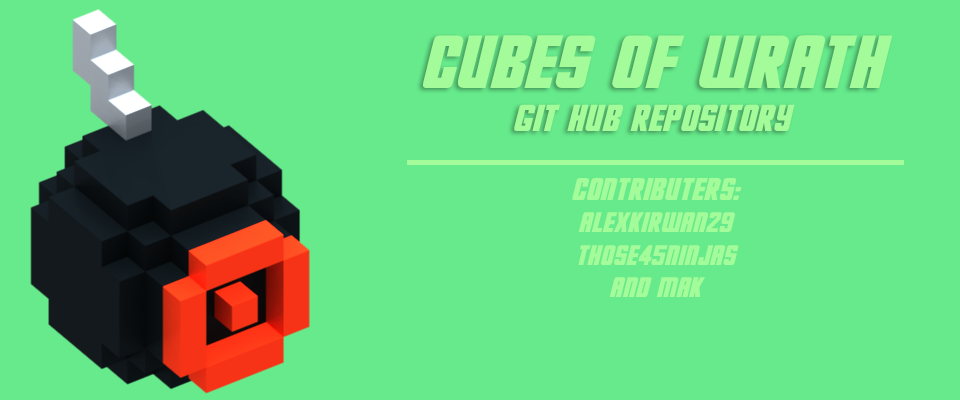
<style>
.page{position:relative;width:960px;height:400px;background:#66ea8b}
.page>*{position:absolute;margin:0}
.t1{font:36px "HesDeadJim";color:#a4fb99}
.t2{font:72px "HesDeadJim";color:#a4fb99}
.t3{font:27px "HesDeadJim";color:#a4fb99}
.t4{font:30px "HesDeadJim";color:#a4fb99}
</style>
<div class="page">
<p class="t1" style="left:423px;top:35px;width:470px;height:96px;text-align:center"><span class="t2">cubes of wrath<br></span>git hub repository</p>
<p class="t3" style="left:572px;top:178px;width:170px;height:119px;text-align:center"><span class="t4">contributers:<br></span>alexkirwan29<br>those45ninjas<br>and mak</p>
</div>
